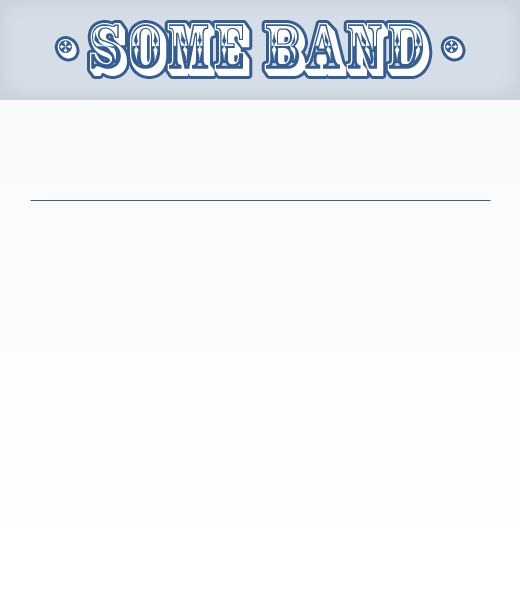
<style>
.page{position:relative;width:520px;height:600px}
.page>*{position:absolute;margin:0}
.t1{font:70px "RosewoodStd-Regular";color:#ffffff}
</style>
<div class="page">
<p class="t1" style="left:57px;top:23px;width:406px;height:53px">• Some band •</p>
</div>
